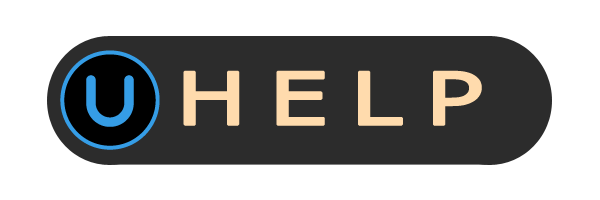
<style>
.page{position:relative;width:600px;height:200px;background:#ffffff}
.page>*{position:absolute;margin:0}
.t1{font:72px "Tahoma";letter-spacing:0.22em;color:#ffdbad;font-weight:bold;scale:1.4 1}
</style>
<div class="page">
<p class="t1" style="left:183px;top:70px;width:299px;height:56px">HELP</p>
</div>
